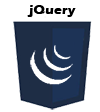
<style>
.page{position:relative;width:100px;height:112px;background:#ffffff}
.page>*{position:absolute;margin:0}
.t1{font:13.4px "ErasITC-Bold";color:#000000}
</style>
<div class="page">
<p class="t1" style="left:27px;top:5px;width:49px;height:12px">jQuery</p>
</div>
